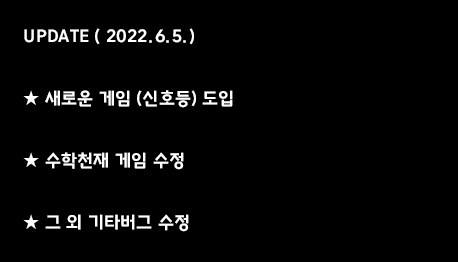
<style>
.page{position:relative;width:458px;height:262px;background:#000000}
.page>*{position:absolute;margin:0}
.t1{font:17.7px "BinggraeMelona-Bold";color:#ffffff}
</style>
<div class="page">
<p class="t1" style="left:23px;top:28px;width:210px;height:204px">UPDATE ( 2022.6.5.)<br><br>★ 새로운 게임 (신호등) 도입<br><br>★ 수학천재 게임 수정<br><br>★ 그 외 기타버그 수정</p>
</div>
